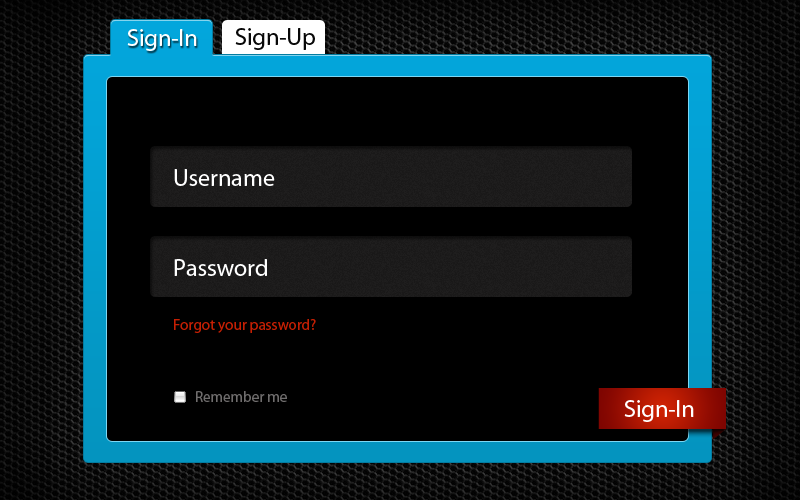
<style>
.page{position:relative;width:800px;height:500px;background:#000000}
.page>*{position:absolute;margin:0}
.t1{font:24px "MyriadPro-Regular";color:#ffffff}
.t2{font:24px "MyriadPro-Regular";color:#080808}
.t3{font:15px "MyriadPro-Regular";color:#c51f03}
.t4{font:15px "MyriadPro-Regular";color:#6f6d6d}
</style>
<div class="page">
<p class="t1" style="left:127px;top:29px;width:70px;height:22px">Sign-In</p>
<p class="t2" style="left:235px;top:28px;width:80px;height:22px">Sign-Up</p>
<p class="t1" style="left:174px;top:169px;width:101px;height:17px">Username</p>
<p class="t1" style="left:174px;top:259px;width:93px;height:17px">Password</p>
<p class="t3" style="left:174px;top:319px;width:142px;height:14px">Forgot your password?</p>
<p class="t4" style="left:196px;top:391px;width:91px;height:11px">Remember me</p>
<p class="t1" style="left:624px;top:400px;width:70px;height:22px">Sign-In</p>
</div>
